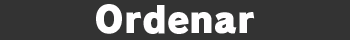
<style>
.page{position:relative;width:350px;height:40px;background:#333333}
.page>*{position:absolute;margin:0}
.t1{font:36px "RodinPro-UB";letter-spacing:-0.002em;color:#fffeff}
</style>
<div class="page">
<p class="t1" style="left:96px;top:4px;width:159px;height:30px">Ordenar</p>
</div>
